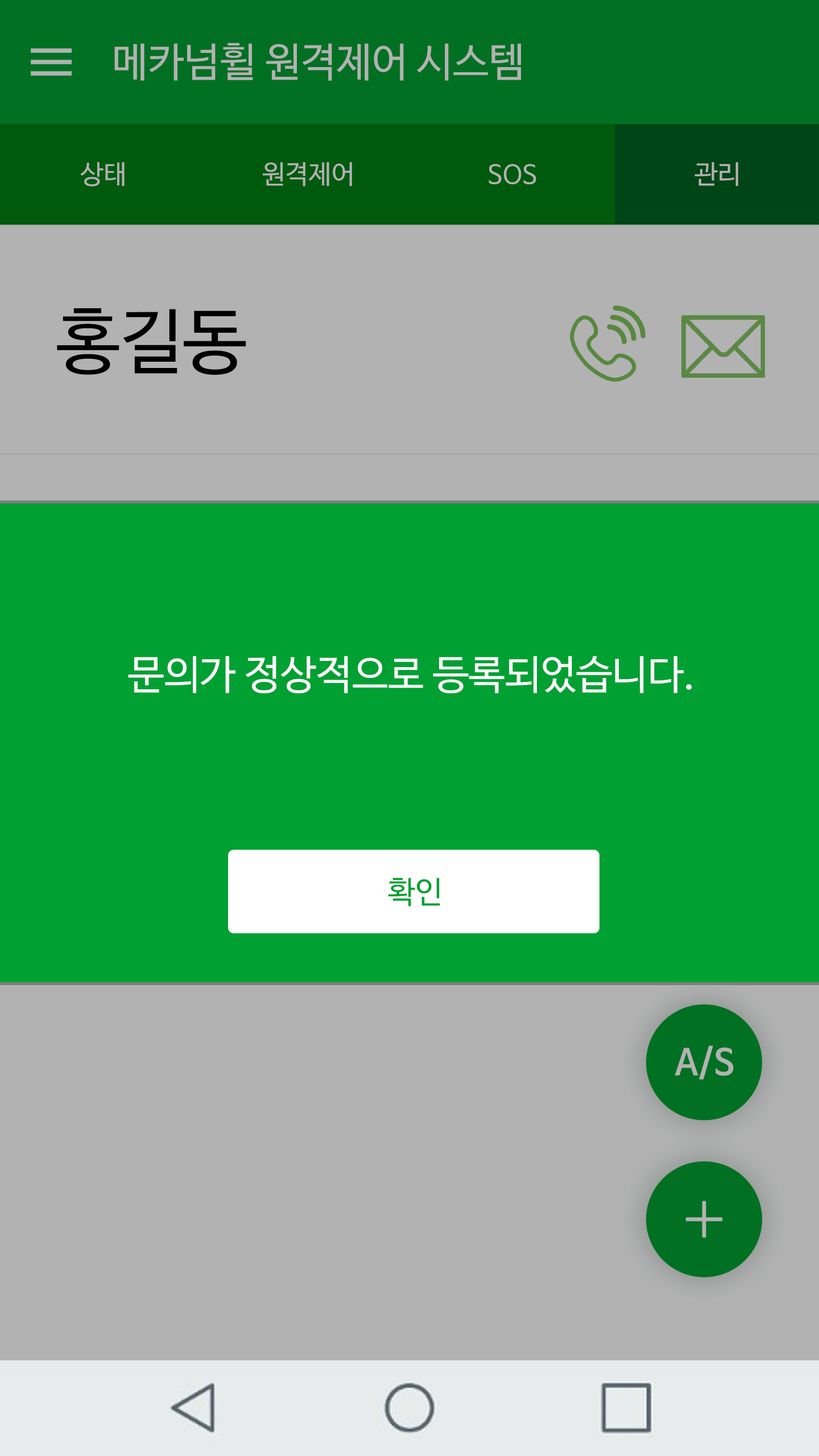
<style>
.page{position:relative;width:819px;height:1456px;background:#b2b2b2}
.page>*{position:absolute;margin:0}
.t1{font:40.3px "NanumBarunGothicOTF";color:#b2b2b2}
.t2{font:26.1px "NanumBarunGothicOTF";color:#b2b2b2}
.t3{font:71.1px "NanumBarunGothicOTF";color:#000000}
.t4{font:40.3px "NanumBarunGothicOTF";color:#ffffff}
.t5{font:30.8px "NanumBarunGothicOTF";color:#01a032}
.t6{font:35.5px "NanumBarunGothicOTFBold";color:#b2b2b2}
</style>
<div class="page">
<p class="t1" style="left:114px;top:43px;width:407px;height:38px">메카넘휠 원격제어 시스템</p>
<p class="t2" style="left:80px;top:162px;width:45px;height:25px">상태</p>
<p class="t2" style="left:263px;top:162px;width:89px;height:25px">원격제어</p>
<p class="t2" style="left:489px;top:164px;width:47px;height:20px">SOS</p>
<p class="t2" style="left:694px;top:162px;width:44px;height:24px">관리</p>
<p class="t3" style="left:57px;top:308px;width:189px;height:67px">홍길동</p>
<p class="t4" style="left:128px;top:656px;width:564px;height:37px">문의가 정상적으로 등록되었습니다.</p>
<p class="t5" style="left:388px;top:878px;width:52px;height:29px">확인</p>
<p class="t6" style="left:675px;top:1045px;width:59px;height:34px">A/S</p>
</div>
